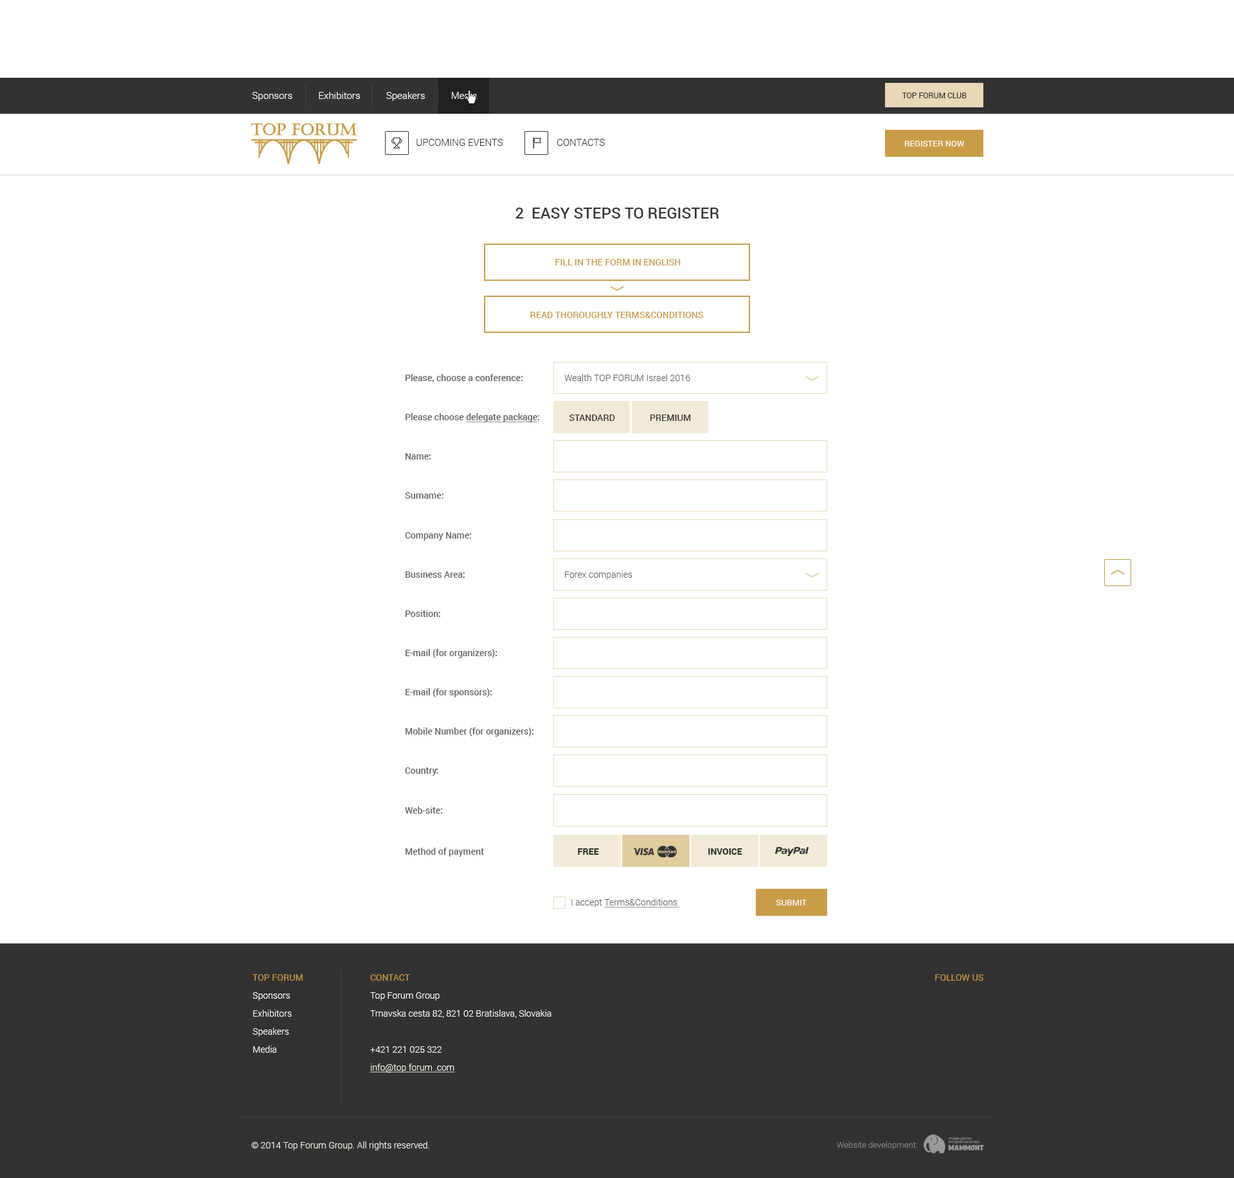
<style>
.page{position:relative;width:1234px;height:1178px;background:#ffffff}
.page>*{position:absolute;margin:0}
.t1{font:9.6px "Roboto-Light";color:#ffffff}
.t2{font:7.7px "Roboto-Regular";color:#323232}
.t3{font:9.6px "Roboto-Light";color:#323232}
.t4{font:8.4px "Roboto-Regular";color:#ffffff}
.t5{font:15.4px "Roboto-Medium";color:#323232}
.t6{font:9px "Roboto-Medium";color:#c99c47}
.t7{font:9px "Roboto-Medium";color:#606060}
.t8{font:9px "Roboto-Light";color:#606060}
.t9{font:9px "Roboto-Medium";color:#606060;text-decoration:underline}
.t10{font:9px "Roboto-Medium";color:#323232;text-transform:uppercase}
.t11{font:9px "Roboto-Black";color:#323232;text-transform:uppercase}
.t12{font:9px "Roboto-Light";color:#606060;text-decoration:underline}
.t13{font:9px/14.1px "Roboto-Light";color:#ffffff}
.t14{font:9px/14.1px "Roboto-Regular";color:#c99c47}
.t15{font:9px/14.1px "Roboto-Light";color:#f8f3e9;text-decoration:underline}
.t16{font:9px "Roboto-Regular";color:#c99c47}
.t17{font:9px "Roboto-Light";color:#f8f3e9}
.t18{font:8.4px "Roboto-Light";color:#858585}
</style>
<div class="page">
<p class="t1" style="left:252px;top:92px;width:225px;height:9px">Sponsors           Exhibitors           Speakers           Media</p>
<p class="t2" style="left:902px;top:93px;width:65px;height:5px">TOP FORUM CLUB</p>
<p class="t3" style="left:417px;top:139px;width:86px;height:7px">UPCOMING EVENTS</p>
<p class="t3" style="left:557px;top:139px;width:48px;height:7px">CONTACTS</p>
<p class="t4" style="left:905px;top:141px;width:60px;height:6px">REGISTER NOW</p>
<p class="t5" style="left:516px;top:208px;width:203px;height:11px">2  EASY STEPS TO REGISTER</p>
<p class="t6" style="left:555px;top:259px;width:126px;height:7px">FILL IN THE FORM IN ENGLISH</p>
<p class="t6" style="left:530px;top:312px;width:173px;height:6px">READ THOROUGHLY TERMS&amp;CONDITIONS</p>
<p class="t7" style="left:406px;top:374px;width:117px;height:8px">Please, choose a conference:</p>
<p class="t8" style="left:564px;top:374px;width:126px;height:7px">Wealth TOP FORUM Israel 2016</p>
<p class="t9" style="left:406px;top:413px;width:133px;height:9px"><span class="t7">Please choose </span>delegate package<span class="t7">:</span></p>
<p class="t10" style="left:569px;top:415px;width:46px;height:6px">Standard</p>
<p class="t10" style="left:650px;top:415px;width:41px;height:6px">Premium</p>
<p class="t7" style="left:406px;top:453px;width:25px;height:7px">Name:</p>
<p class="t7" style="left:405px;top:492px;width:39px;height:7px">Surname:</p>
<p class="t7" style="left:405px;top:532px;width:67px;height:9px">Company Name:</p>
<p class="t7" style="left:406px;top:571px;width:59px;height:7px">Business Area:</p>
<p class="t8" style="left:565px;top:571px;width:68px;height:9px">Forex companies</p>
<p class="t7" style="left:406px;top:610px;width:34px;height:7px">Position:</p>
<p class="t7" style="left:406px;top:649px;width:92px;height:9px">E-mail (for organizers):</p>
<p class="t7" style="left:406px;top:688px;width:86px;height:10px">E-mail (for sponsors):</p>
<p class="t7" style="left:406px;top:728px;width:128px;height:9px">Mobile Number (for organizers):</p>
<p class="t7" style="left:405px;top:768px;width:33px;height:8px">Country:</p>
<p class="t7" style="left:405px;top:807px;width:38px;height:7px">Web-site:</p>
<p class="t7" style="left:406px;top:848px;width:78px;height:9px">Method of payment</p>
<p class="t11" style="left:578px;top:849px;width:21px;height:6px">free</p>
<p class="t11" style="left:708px;top:849px;width:34px;height:6px">Invoice</p>
<p class="t12" style="left:572px;top:899px;width:108px;height:9px"><span class="t8">I accept </span>Terms&amp;Conditions</p>
<p class="t4" style="left:776px;top:900px;width:31px;height:6px">SUBMIT</p>
<p class="t13" style="left:253px;top:975px;width:50px;height:78px;text-align:justify"><span class="t14">TOP FORUM<br></span>Sponsors<br>Exhibitors <br>Speakers<br>Media</p>
<p class="t13" style="left:370px;top:975px;width:182px;height:98px;text-align:justify"><span class="t14">CONTACT<br></span>Top Forum Group<br>Trnavska cesta 82, 821 02 Bratislava, Slovakia<br> <br>+421 221 025 322<br><span class="t15">info@top forum .com</span></p>
<p class="t16" style="left:935px;top:975px;width:49px;height:6px">FOLLOW US</p>
<p class="t17" style="left:251px;top:1142px;width:178px;height:9px">© 2014 Top Forum Group. All rights reserved.</p>
<p class="t18" style="left:837px;top:1142px;width:81px;height:8px">Website development:</p>
</div>
